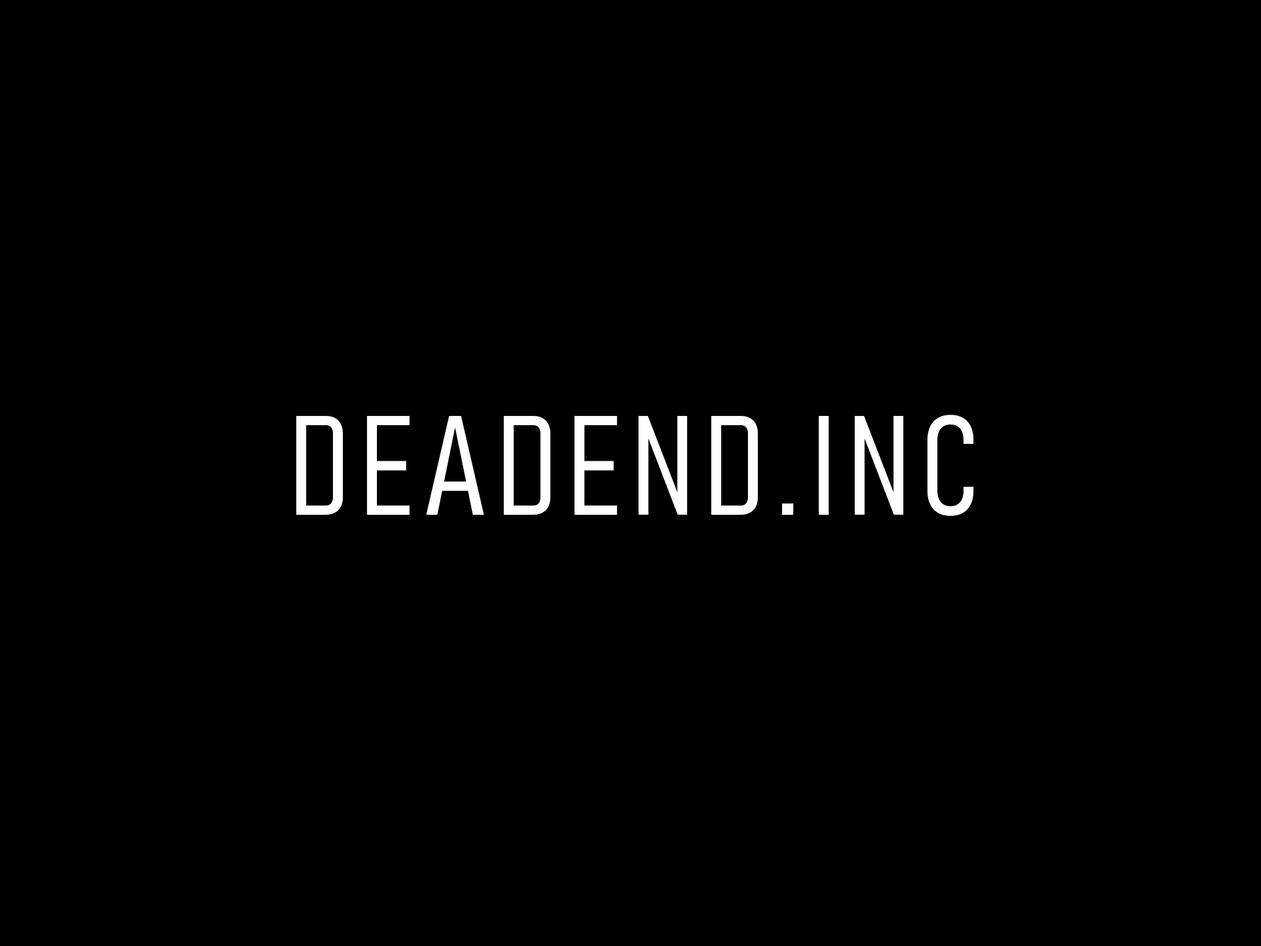
<style>
.page{position:relative;width:1261px;height:946px;background:#000000}
.page>*{position:absolute;margin:0}
.t1{font:139px "Bahnschrift-LightCondensed";letter-spacing:0.08em;color:#ffffff}
</style>
<div class="page">
<p class="t1" style="left:296px;top:414px;width:678px;height:102px">DEADEND.INC</p>
</div>
